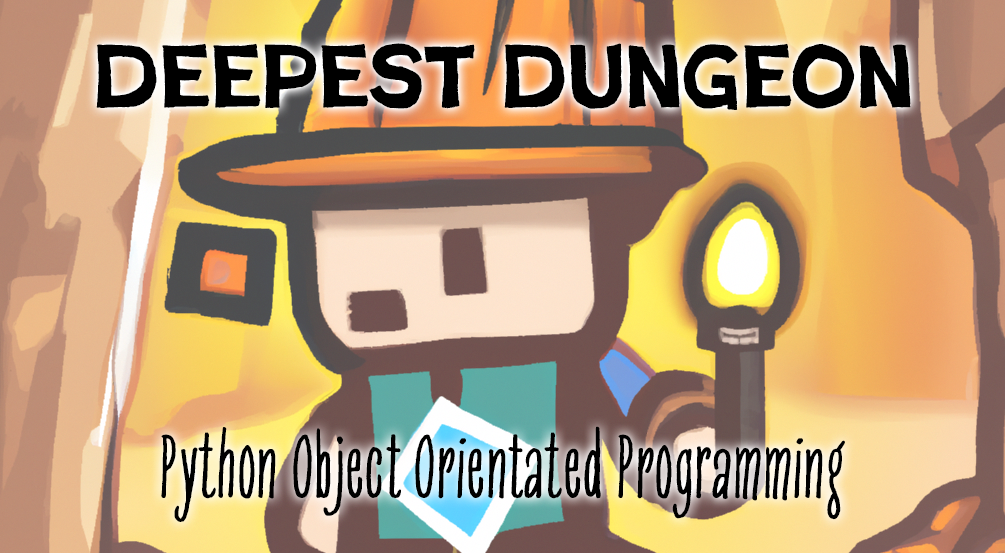
<style>
.page{position:relative;width:1005px;height:553px}
.page>*{position:absolute;margin:0}
.t1{font:91px "PosterCutNeue-Regular";color:#000000}
.t2{font:91px "SixHands-Condensed";color:#000000}
</style>
<div class="page">
<p class="t1" style="left:96px;top:43px;width:815px;height:67px">Deepest Dungeon</p>
<p class="t2" style="left:161px;top:426px;width:684px;height:96px">Python Object Orientated Programming</p>
</div>
